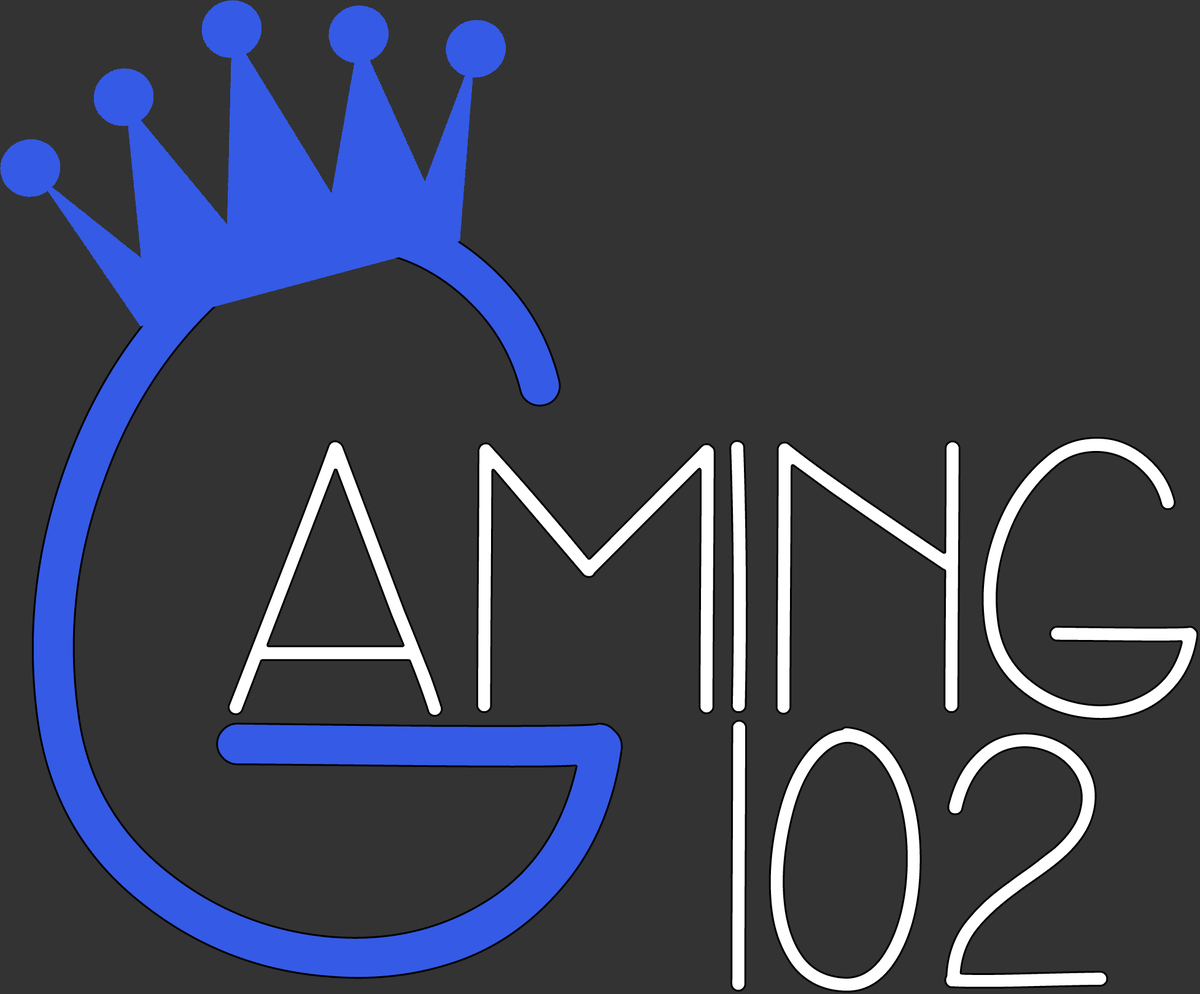
<style>
.page{position:relative;width:1200px;height:994px;background:#333333}
.page>*{position:absolute;margin:0}
.t1{font:1060.3px "Simplicity";color:#355ae5}
.t2{font:388.6px "Simplicity";color:#ffffff}
</style>
<div class="page">
<p class="t1" style="left:32px;top:207px;width:591px;height:772px">G</p>
<p class="t2" style="left:228px;top:437px;width:970px;height:283px">AMING</p>
<p class="t2" style="left:730px;top:720px;width:378px;height:273px">102</p>
</div>
